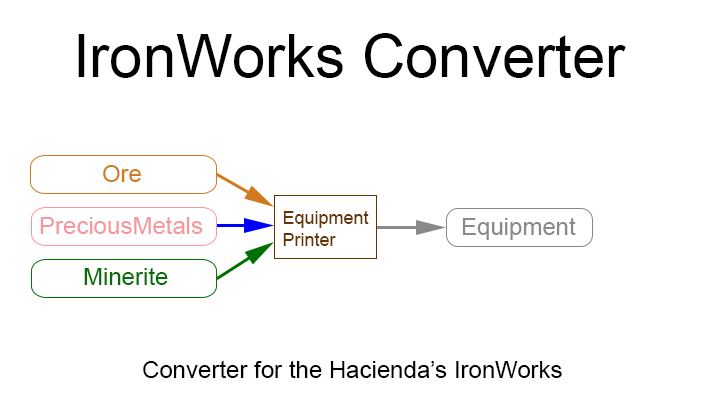
<style>
.page{position:relative;width:705px;height:401px;background:#ffffff}
.page>*{position:absolute;margin:0}
.t1{font:60px "ArialMT";color:#000000}
.t2{font:24px "ArialMT";color:#d2791f}
.t3{font:24px "ArialMT";color:#f5989d}
.t4{font:18px "ArialMT";color:#663401}
.t5{font:24px "ArialMT";color:#898989}
.t6{font:24px "ArialMT";color:#027002}
.t7{font:24px "ArialMT";color:#000000}
</style>
<div class="page">
<p class="t1" style="left:78px;top:33px;width:548px;height:45px">IronWorks Converter</p>
<p class="t2" style="left:103px;top:165px;width:38px;height:17px">Ore</p>
<p class="t3" style="left:40px;top:216px;width:163px;height:18px">PreciousMetals</p>
<p class="t4" style="left:283px;top:211px;width:86px;height:35px">Equipment<br>Printer</p>
<p class="t5" style="left:462px;top:217px;width:114px;height:23px">Equipment</p>
<p class="t6" style="left:84px;top:267px;width:84px;height:18px">Minerite</p>
<p class="t7" style="left:143px;top:360px;width:419px;height:18px">Converter for the Hacienda’s IronWorks</p>
</div>
